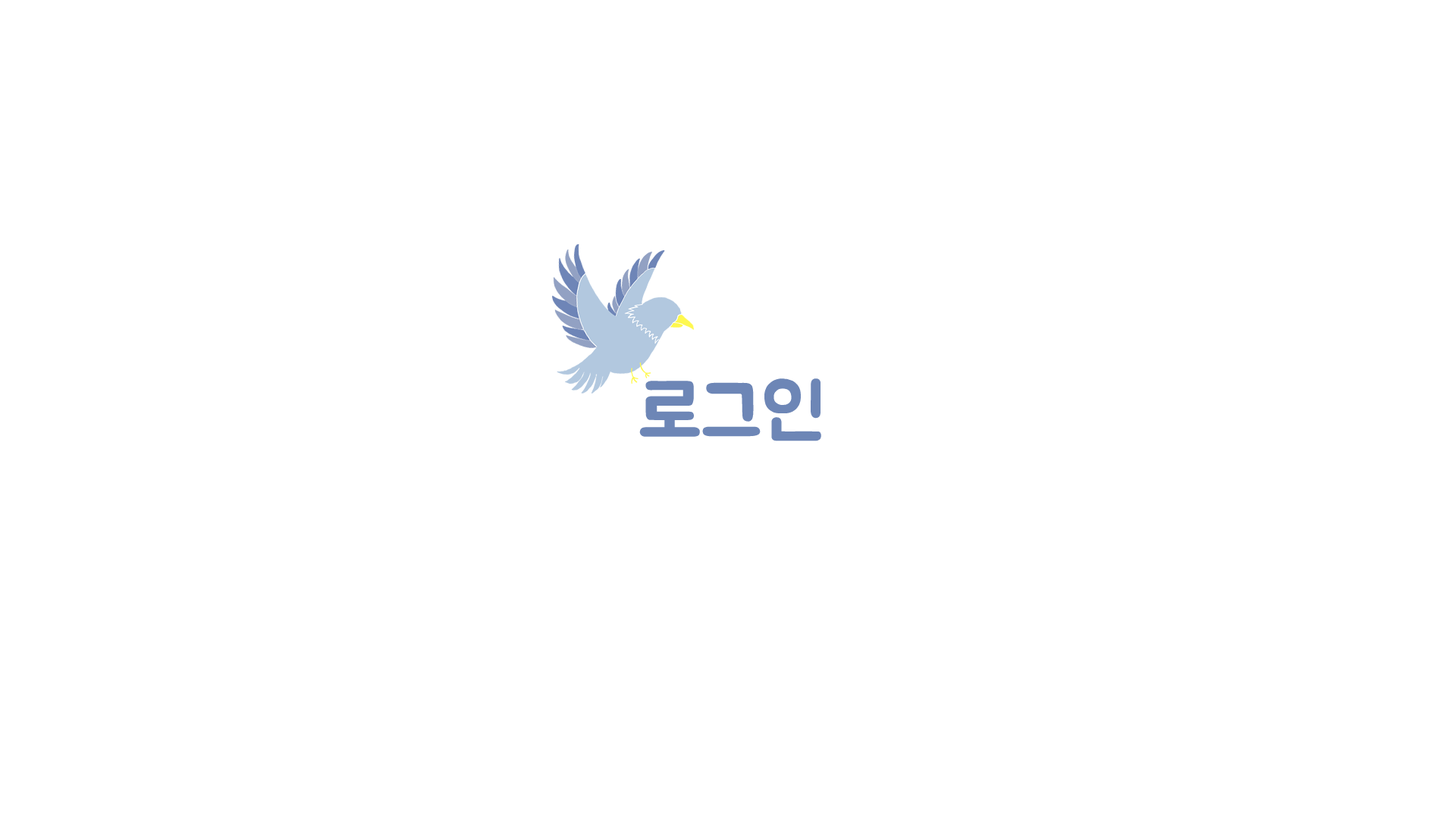
<style>
.page{position:relative;width:1456px;height:819px;background:#ffffff}
.page>*{position:absolute;margin:0}
.t1{font:77.3px "BMJUAOTF";color:#6d86b6}
</style>
<div class="page">
<p class="t1" style="left:639px;top:378px;width:182px;height:63px">로그인</p>
</div>
